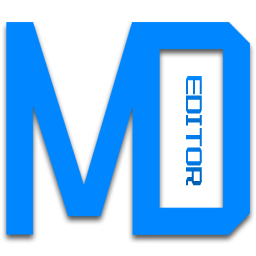
<style>
.page{position:relative;width:256px;height:256px;background:#0087ff}
.page>*{position:absolute;margin:0}
.t1{font:21.9px "zcoolqingkehuangyouti-Regular";color:#0078e2;scale:2.09 1}
</style>
<div class="page">
<p class="t1" style="left:186px;top:76px;width:16px;height:110px;rotate:90deg">EDITOR</p>
</div>
